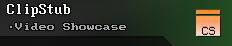
<style>
.page{position:relative;width:232px;height:46px}
.page>*{position:absolute;margin:0}
.t1{font:16px "ModernDOS8x16";color:#ffffff;scale:0.96 1}
.t2{font:16px "ModernDOS8x8";color:#a9a9a9;scale:0.96 1}
</style>
<div class="page">
<p class="t1" style="left:7px;top:4px;width:63px;height:13px">ClipStub</p>
<p class="t2" style="left:10px;top:23px;width:116px;height:7px">•Video Showcase</p>
</div>
